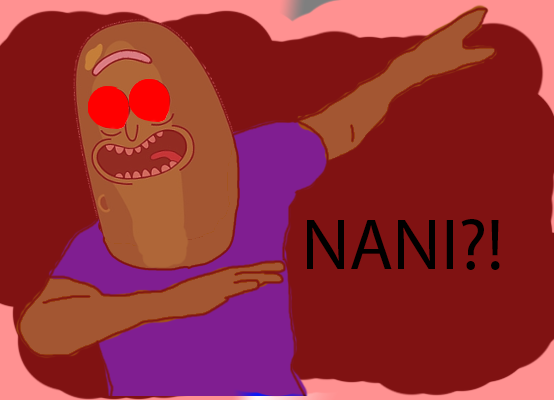
<style>
.page{position:relative;width:554px;height:400px;background:#801212}
.page>*{position:absolute;margin:0}
.t1{font:72px "MyriadPro-Regular";color:#000000}
</style>
<div class="page">
<p class="t1" style="left:307px;top:219px;width:193px;height:51px">NANI?!!!</p>
</div>
